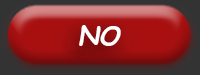
<style>
.page{position:relative;width:200px;height:75px}
.page>*{position:absolute;margin:0}
.t1{font:25.7px "ComicSansMS-BoldItalic";letter-spacing:0.01em;color:#ffffff}
</style>
<div class="page">
<p class="t1" style="left:79px;top:25px;width:42px;height:21px">NO</p>
</div>
